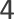
<style>
.page{position:relative;width:14px;height:19px;background:#ffffff}
.page>*{position:absolute;margin:0}
.t1{font:30px "Calibri";color:#3c3c3c}
</style>
<div class="page">
<p class="t1" style="left:0px;top:0px;width:14px;height:19px">4</p>
</div>
